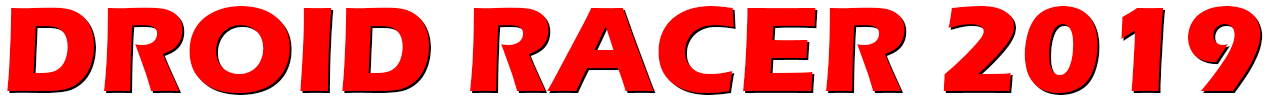
<style>
.page{position:relative;width:1269px;height:101px;background:#ffffff}
.page>*{position:absolute;margin:0}
.t1{font:125px "ErasITC-Bold";color:#ff0000}
</style>
<div class="page">
<p class="t1" style="left:7px;top:6px;width:1254px;height:87px">DROID RACER 2019</p>
<p class="t1" style="left:9px;top:8px;width:1254px;height:87px">DROID RACER 2019</p>
</div>
